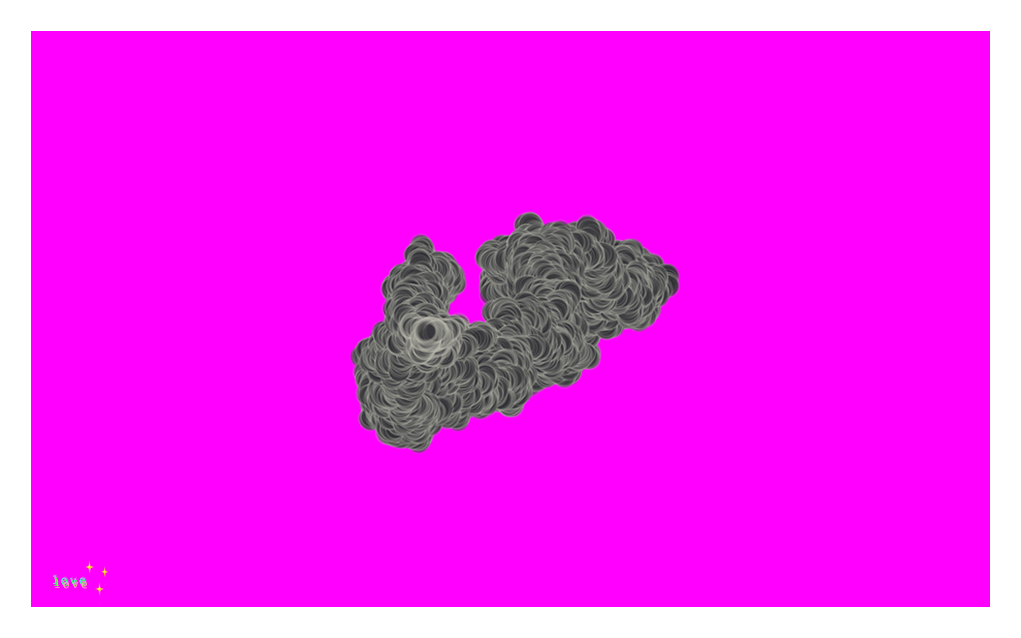
<style>
.page{position:relative;width:1021px;height:638px;background:#ff00ff}
.page>*{position:absolute;margin:0}
.t1{font:12px "Consolas";letter-spacing:0.2em}
.t2{font:12px "Consolas";letter-spacing:0.2em;color:#fe9ba9}
</style>
<div class="page">
<p class="t1" style="left:53px;top:575px;width:32px;height:10px">love</p>
<p class="t1" style="left:54px;top:577px;width:32px;height:10px">love</p>
<p class="t1" style="left:54px;top:577px;width:32px;height:10px">love</p>
<p class="t1" style="left:54px;top:574px;width:32px;height:10px">love</p>
<p class="t2" style="left:55px;top:579px;width:32px;height:10px">love</p>
<p class="t2" style="left:55px;top:579px;width:32px;height:10px">love</p>
</div>
